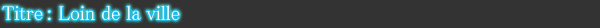
<style>
.page{position:relative;width:600px;height:28px;background:#333333}
.page>*{position:absolute;margin:0}
.t1{font:20px "MS-PMincho";color:#ffffff}
</style>
<div class="page">
<p class="t1" style="left:2px;top:5px;width:178px;height:16px">Titre : Loin de la ville</p>
</div>
